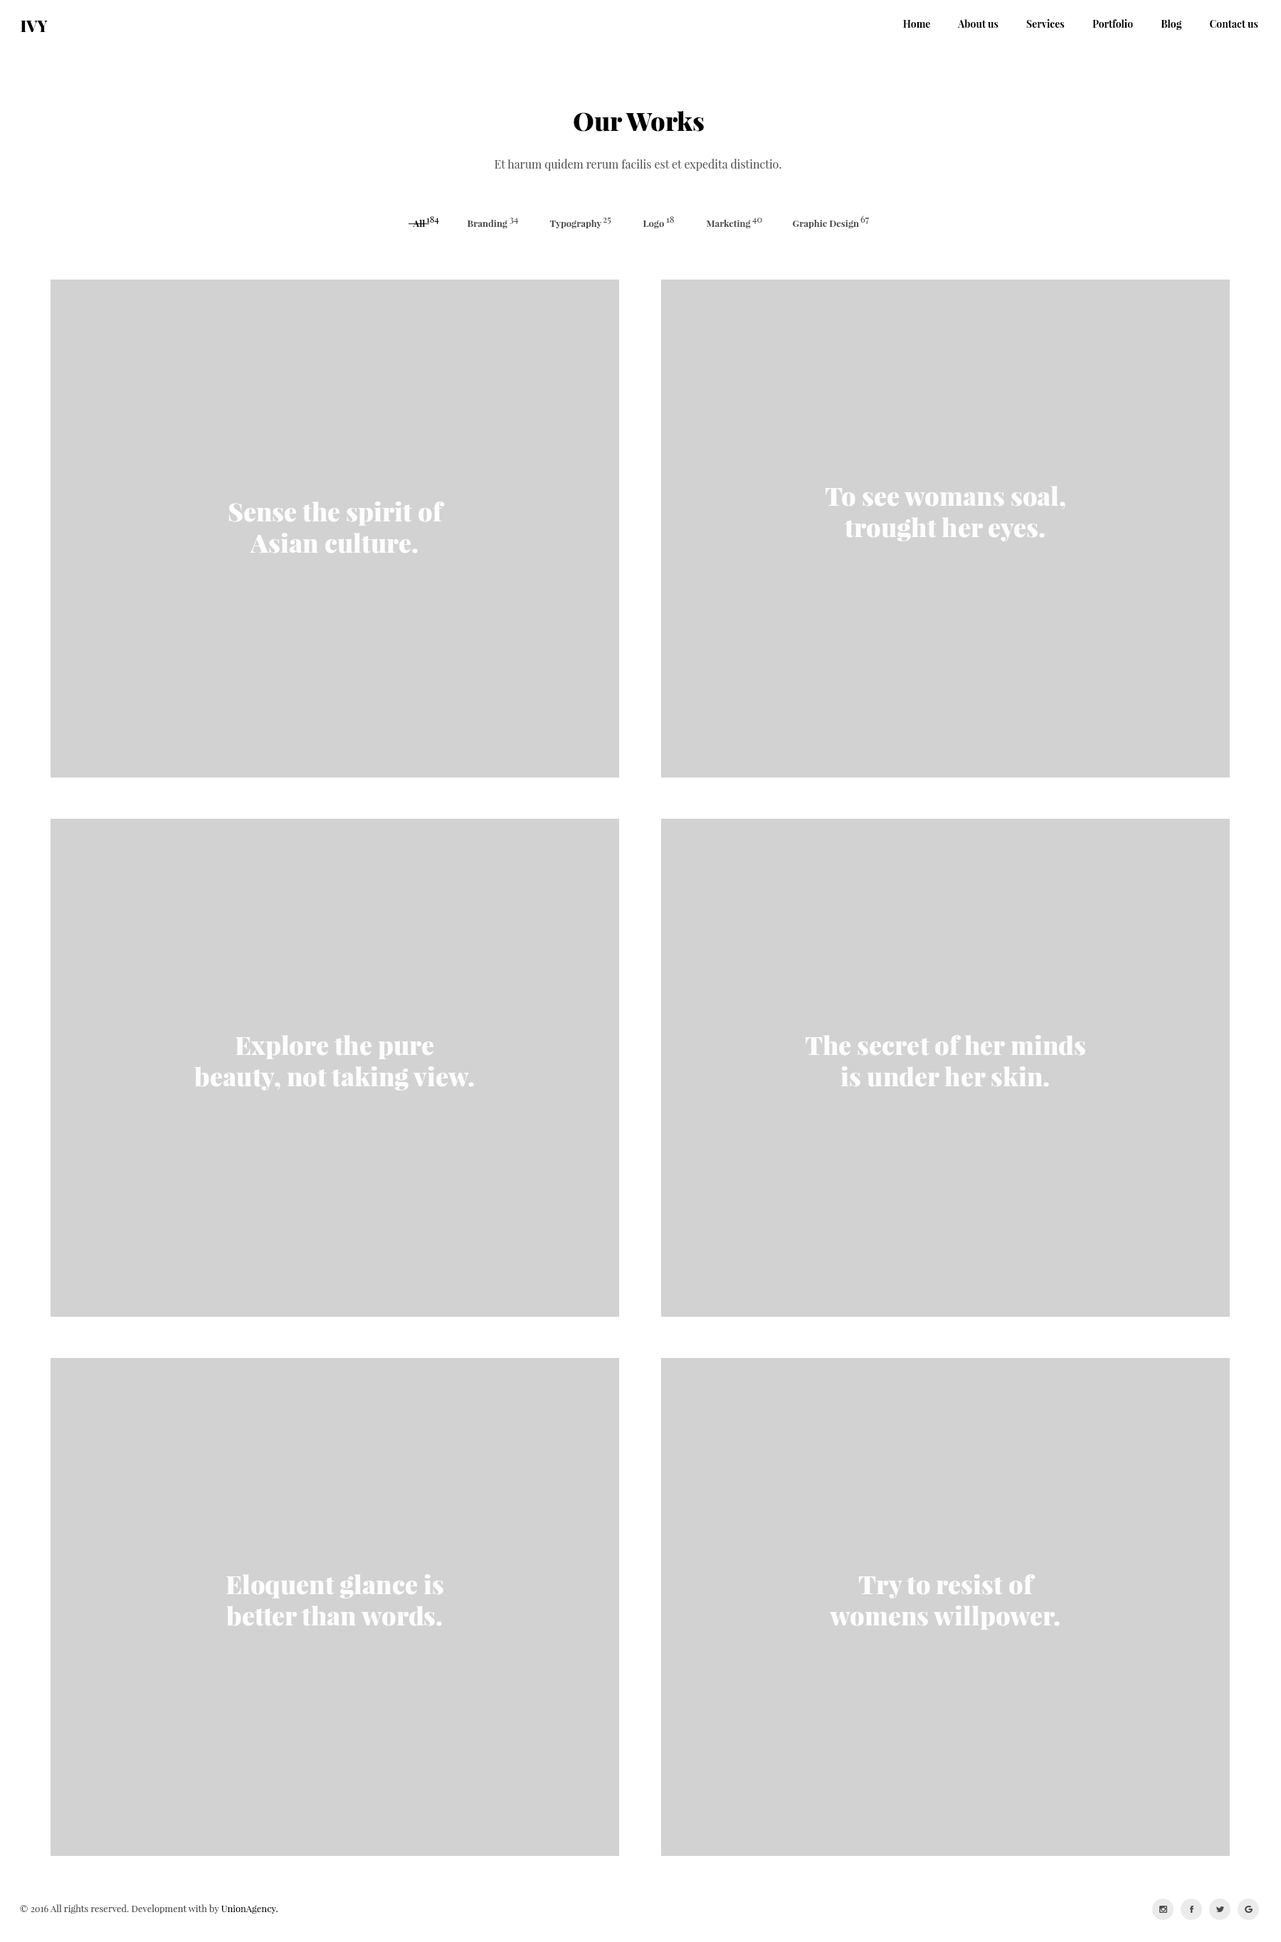
<style>
.page{position:relative;width:1281px;height:1942px;background:#d2d2d2}
.page>*{position:absolute;margin:0}
.t1{font:15.7px "PlayfairDisplay-Black";color:#000000}
.t2{font:10px "PlayfairDisplay-Bold";color:#000000}
.t3{font:25.6px "PlayfairDisplay-Black";color:#000000}
.t4{font:11.4px "PlayfairDisplay-Regular";color:#494949}
.t5{font:9px "PlayfairDisplay-Bold";color:#000000}
.t6{font:9px "PlayfairDisplay-Regular";color:#000000}
.t7{font:9px "PlayfairDisplay-Bold";color:#494949}
.t8{font:9px "PlayfairDisplay-Regular";color:#494949}
.t9{font:25.6px/31.3px "PlayfairDisplay-Black";color:#fdfdfd}
.t10{font:9.2px "PlayfairDisplay-Regular";color:#494949}
.t11{font:9.2px "PlayfairDisplay-Regular";color:#000000}
</style>
<div class="page">
<p class="t1" style="left:21px;top:21px;width:27px;height:11px">IVY</p>
<p class="t2" style="left:903px;top:19px;width:355px;height:11px">Home            About us            Services            Portfolio            Blog            Contact us</p>
<p class="t3" style="left:573px;top:111px;width:131px;height:21px">Our Works</p>
<p class="t4" style="left:494px;top:159px;width:287px;height:12px">Et harum quidem rerum facilis est et expedita distinctio.</p>
<p class="t5" style="left:413px;top:220px;width:12px;height:7px">All</p>
<p class="t6" style="left:426px;top:216px;width:13px;height:8px">184</p>
<p class="t7" style="left:467px;top:220px;width:40px;height:8px">Branding</p>
<p class="t8" style="left:509px;top:218px;width:10px;height:6px">34</p>
<p class="t7" style="left:549px;top:220px;width:53px;height:8px">Typography</p>
<p class="t8" style="left:603px;top:217px;width:8px;height:7px">25</p>
<p class="t7" style="left:642px;top:221px;width:22px;height:7px">Logo</p>
<p class="t8" style="left:666px;top:216px;width:8px;height:7px">18</p>
<p class="t7" style="left:706px;top:220px;width:45px;height:8px">Marketing</p>
<p class="t8" style="left:752px;top:218px;width:10px;height:6px">40</p>
<p class="t7" style="left:792px;top:220px;width:67px;height:8px">Graphic Design</p>
<p class="t8" style="left:860px;top:216px;width:9px;height:8px">67</p>
<p class="t9" style="left:825px;top:486px;width:240px;height:55px;text-align:center">To see womans soal,  trought her eyes.</p>
<p class="t9" style="left:228px;top:502px;width:217px;height:51px;text-align:center">Sense the spirit of Asian culture.</p>
<p class="t9" style="left:194px;top:1035px;width:280px;height:56px;text-align:center">Explore the pure beauty, not taking view.</p>
<p class="t9" style="left:805px;top:1035px;width:280px;height:52px;text-align:center">The secret of her minds is under her skin.</p>
<p class="t9" style="left:226px;top:1574px;width:217px;height:52px;text-align:center">Eloquent glance is better than words.</p>
<p class="t9" style="left:829px;top:1574px;width:230px;height:56px;text-align:center">Try to resist of womens willpower.</p>
<p class="t10" style="left:20px;top:1904px;width:258px;height:10px">© 2016 All rights reserved. Development with by <span class="t11">UnionAgency.</span></p>
</div>
